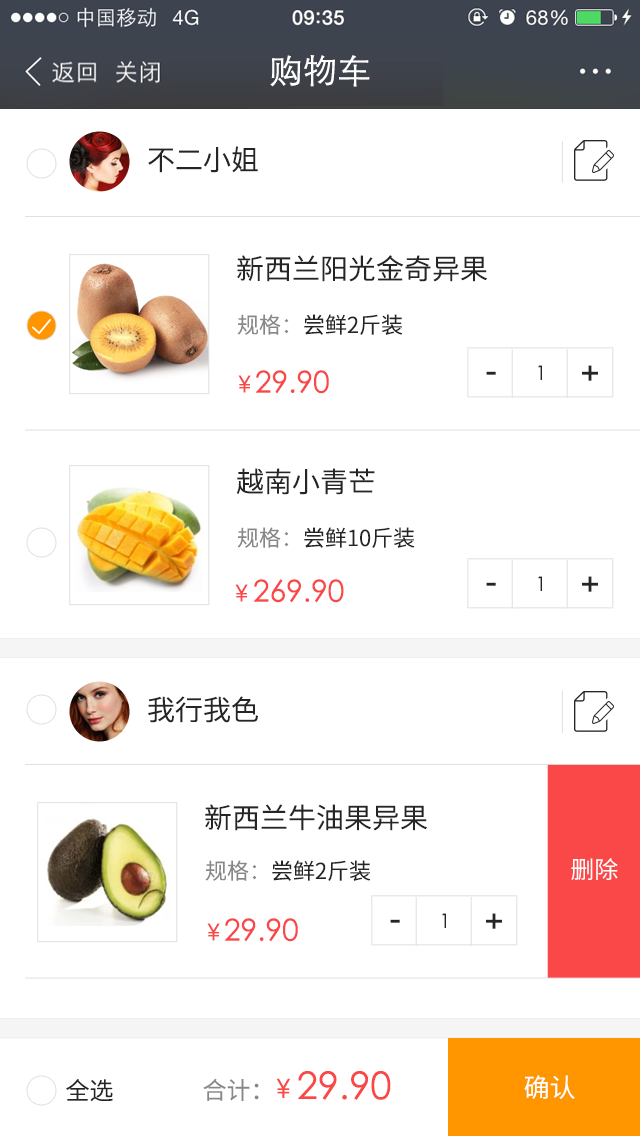
<style>
.page{position:relative;width:640px;height:1136px;background:#ffffff}
.page>*{position:absolute;margin:0}
.t1{font:34px "STXihei";color:#ffffff}
.t2{font:28px "SourceHanSansCN-Normal";color:#252525}
.t3{font:22px "SourceHanSansCN-Normal";color:#252525}
.t4{font:22px "SourceHanSansCN-Normal";color:#888888}
.t5{font:20px "STXihei";color:#252525}
.t6{font:36px "DFPHeiW7";color:#252525}
.t7{font:40px "STXihei";color:#fa4b4b}
.t8{font:30px "STXihei";color:#fa4848}
.t9{font:24px "SourceHanSansCN-Regular";color:#ffffff}
.t10{font:38px "STXihei";color:#fa4848}
.t11{font:24px "SourceHanSansCN-Normal";color:#888888}
.t12{font:24px "SourceHanSansCN-Normal";color:#252525}
.t13{font:45px "STXihei";color:#fa4b4b}
.t14{font:26px "SourceHanSansCN-Regular";color:#ffffff}
</style>
<div class="page">
<p class="t1" style="left:270px;top:55px;width:100px;height:32px">购物车</p>
<p class="t2" style="left:148px;top:146px;width:110px;height:27px">不二小姐</p>
<p class="t2" style="left:237px;top:255px;width:250px;height:27px">新西兰阳光金奇异果</p>
<p class="t3" style="left:237px;top:314px;width:166px;height:21px"><span class="t4">规格：</span>尝鲜2斤装</p>
<p class="t5" style="left:538px;top:365px;width:4px;height:15px">1</p>
<p class="t6" style="left:582px;top:365px;width:16px;height:16px">+</p>
<p class="t7" style="left:238px;top:375px;width:13px;height:18px">¥</p>
<p class="t8" style="left:255px;top:370px;width:74px;height:24px">29.90</p>
<p class="t6" style="left:486px;top:371px;width:10px;height:4px">-</p>
<p class="t2" style="left:236px;top:468px;width:139px;height:27px">越南小青芒</p>
<p class="t3" style="left:237px;top:527px;width:178px;height:21px"><span class="t4">规格：</span>尝鲜10斤装</p>
<p class="t8" style="left:253px;top:579px;width:91px;height:24px">269.90</p>
<p class="t6" style="left:486px;top:582px;width:10px;height:4px">-</p>
<p class="t5" style="left:538px;top:576px;width:4px;height:15px">1</p>
<p class="t6" style="left:582px;top:576px;width:16px;height:16px">+</p>
<p class="t7" style="left:235px;top:584px;width:13px;height:18px">¥</p>
<p class="t2" style="left:148px;top:696px;width:110px;height:27px">我行我色</p>
<p class="t2" style="left:205px;top:804px;width:222px;height:27px">新西兰牛油果异果</p>
<p class="t3" style="left:205px;top:860px;width:166px;height:21px"><span class="t4">规格：</span>尝鲜2斤装</p>
<p class="t9" style="left:571px;top:858px;width:47px;height:22px">删除</p>
<p class="t8" style="left:224px;top:918px;width:74px;height:24px">29.90</p>
<p class="t5" style="left:442px;top:913px;width:4px;height:15px">1</p>
<p class="t6" style="left:486px;top:913px;width:16px;height:16px">+</p>
<p class="t7" style="left:207px;top:923px;width:13px;height:18px">¥</p>
<p class="t6" style="left:390px;top:919px;width:10px;height:4px">-</p>
<p class="t10" style="left:203px;top:1071px;width:188px;height:30px"><span class="t11">合计：    </span>29.90</p>
<p class="t12" style="left:66px;top:1079px;width:47px;height:23px">全选</p>
<p class="t13" style="left:276px;top:1078px;width:15px;height:20px">¥</p>
<p class="t14" style="left:524px;top:1075px;width:51px;height:24px">确认</p>
</div>
